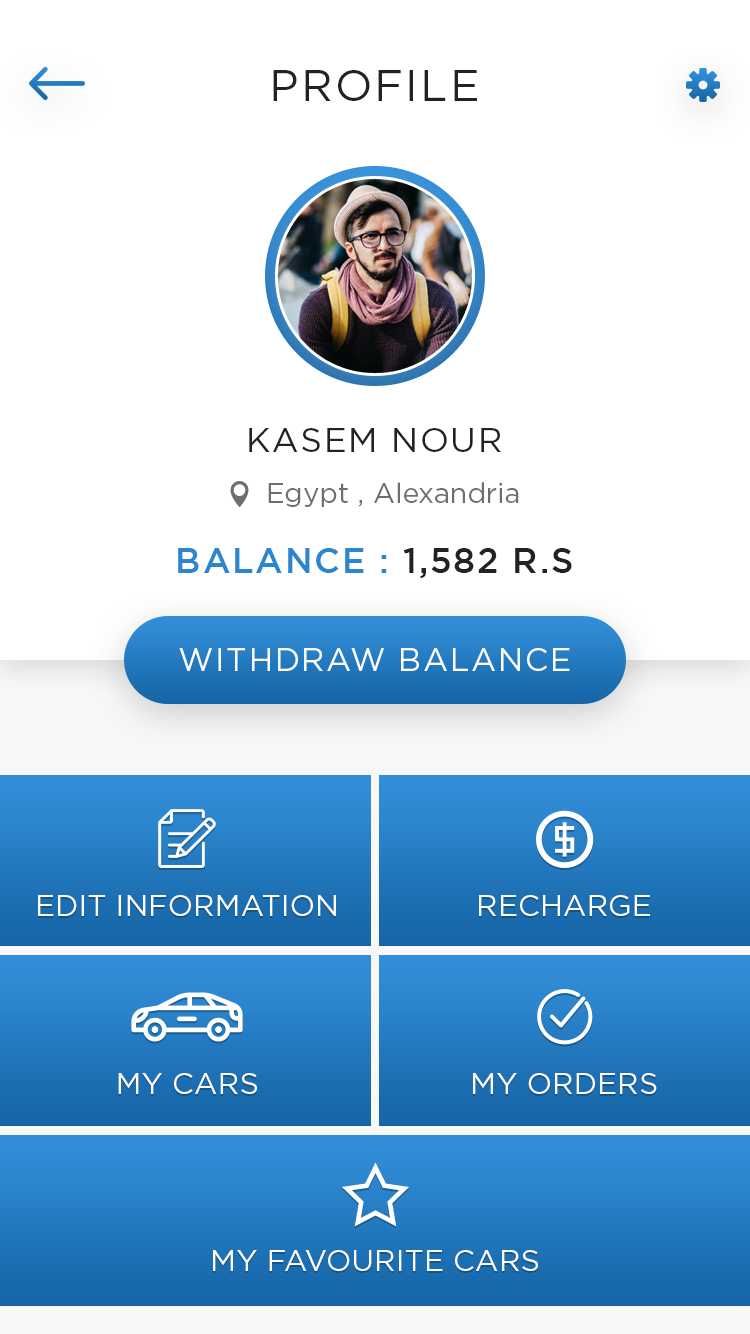
<style>
.page{position:relative;width:750px;height:1334px;background:#ffffff}
.page>*{position:absolute;margin:0}
.t1{font:44px "Gotham-Book";letter-spacing:0.05em;color:#222222;text-transform:uppercase}
.t2{font:34px "Gotham-Book";letter-spacing:0.05em;color:#222222;text-transform:uppercase}
.t3{font:28px "Gotham-Book";color:#6e6e6e}
.t4{font:35px "Gotham-Medium";letter-spacing:0.05em;color:#2c86cf;text-transform:uppercase}
.t5{font:35px "Gotham-Medium";letter-spacing:0.05em;color:#222222;text-transform:uppercase}
.t6{font:32px "Gotham-Book";letter-spacing:0.05em;color:#fefefe;text-transform:uppercase}
.t7{font:30px "Gotham-Book";color:#fefefe;text-transform:uppercase}
</style>
<div class="page">
<p class="t1" style="left:273px;top:70px;width:204px;height:31px">Profile</p>
<p class="t2" style="left:249px;top:428px;width:252px;height:24px">KASEM NOUR</p>
<p class="t3" style="left:268px;top:482px;width:251px;height:25px">Egypt , Alexandria</p>
<p class="t4" style="left:178px;top:548px;width:394px;height:30px">BALANCE :<span class="t5"> 1,582 r.s</span></p>
<p class="t6" style="left:179px;top:648px;width:391px;height:23px">Withdraw balance</p>
<p class="t7" style="left:38px;top:895px;width:298px;height:21px">EDIT INFORMATION</p>
<p class="t7" style="left:479px;top:895px;width:171px;height:21px">RECHARGE</p>
<p class="t7" style="left:118px;top:1073px;width:139px;height:21px">MY CARS</p>
<p class="t7" style="left:473px;top:1073px;width:184px;height:21px">MY ORDERS</p>
<p class="t7" style="left:213px;top:1250px;width:325px;height:21px">MY FAVOURITE CARS</p>
</div>
